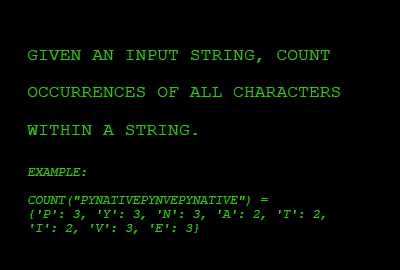
<style>
.page{position:relative;width:400px;height:270px;background:#000000}
.page>*{position:absolute;margin:0}
.t1{font:12.5px/13.9px "CourierNewPSMT";color:#30cc00;text-transform:uppercase;font-style:italic}
.t2{font:18.1px/37.5px "CourierNewPSMT";color:#30cc00;text-transform:uppercase}
</style>
<div class="page">
<p class="t1" style="left:27px;top:50px;width:313px;height:184px"><span class="t2">Given an input string, count <br>occurrences of all characters <br>within a string.<br></span><br><br>example:<br><br>count("pynativepynvepynative") = <br>{'p': 3, 'y': 3, 'n': 3, 'a': 2, 't': 2, <br>'i': 2, 'v': 3, 'e': 3}</p>
</div>
